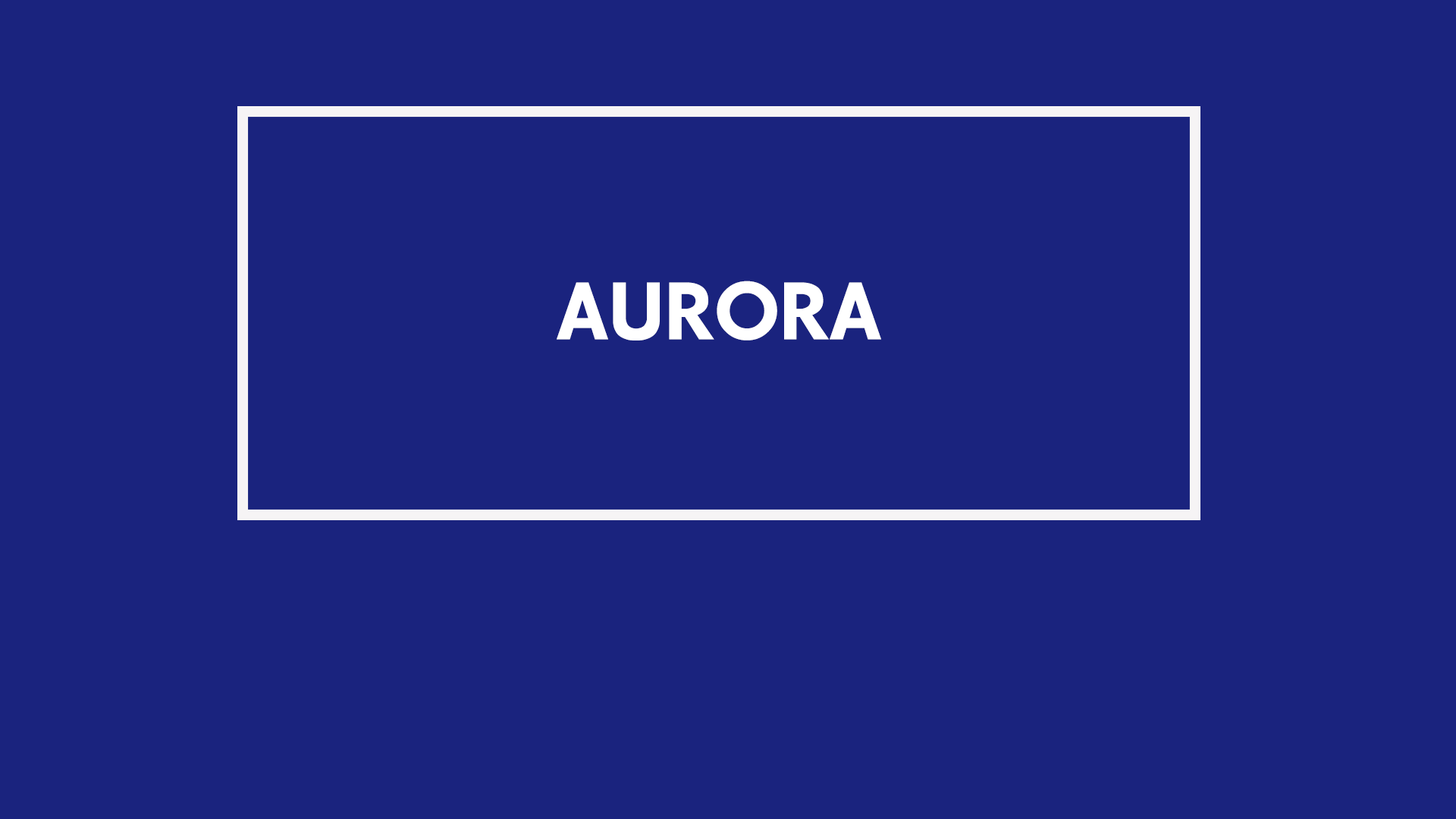
<style>
.page{position:relative;width:1456px;height:819px;background:#1a237e}
.page>*{position:absolute;margin:0}
.t1{font:80.9px "TheSimsSans-Bold";color:#ffffff}
</style>
<div class="page">
<p class="t1" style="left:557px;top:281px;width:324px;height:59px">AURORA</p>
</div>
